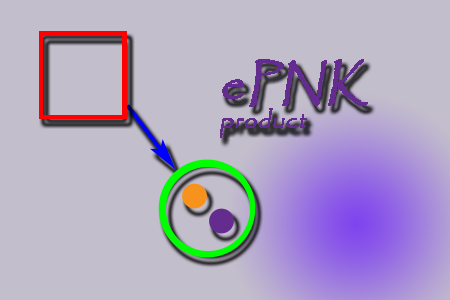
<style>
.page{position:relative;width:450px;height:300px;background:#c3becc}
.page>*{position:absolute;margin:0}
.t1{font:23.9px "Papyrus-Regular";color:#652c90;font-weight:bold;font-style:italic}
.t2{font:47.8px "Papyrus-Regular";color:#652c90;font-weight:bold;font-style:italic}
</style>
<div class="page">
<p class="t1" style="left:220px;top:59px;width:148px;height:79px"><span class="t2">ePNK<br></span>product</p>
</div>
